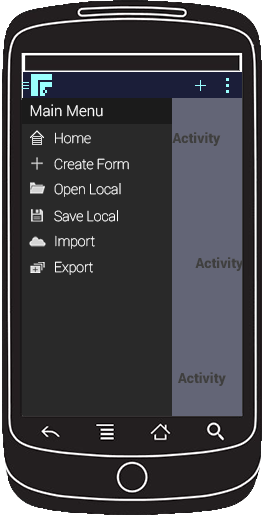
<style>
.page{position:relative;width:263px;height:515px;background:#292929}
.page>*{position:absolute;margin:0}
.t1{font:15px "Roboto-Light";color:#ffffff}
.t2{font:14px "Roboto-Thin";color:#f4f4f4}
.t3{font:14px "Roboto-Black";color:#3f3f3f}
.t4{font:14px "Roboto-Thin";color:#ffffff}
</style>
<div class="page">
<p class="t1" style="left:30px;top:104px;width:73px;height:13px">Main Menu</p>
<p class="t2" style="left:55px;top:132px;width:36px;height:12px">Home</p>
<p class="t3" style="left:172px;top:132px;width:49px;height:14px">Activity</p>
<p class="t4" style="left:54px;top:158px;width:75px;height:12px">Create Form</p>
<p class="t4" style="left:54px;top:183px;width:67px;height:14px">Open Local</p>
<p class="t4" style="left:54px;top:210px;width:64px;height:12px">Save Local</p>
<p class="t4" style="left:55px;top:235px;width:40px;height:14px">Import</p>
<p class="t3" style="left:195px;top:257px;width:49px;height:14px">Activity</p>
<p class="t4" style="left:55px;top:261px;width:38px;height:14px">Export</p>
<p class="t3" style="left:178px;top:372px;width:48px;height:14px">Activity</p>
</div>
